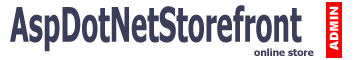
<style>
.page{position:relative;width:360px;height:60px;background:#ffffff}
.page>*{position:absolute;margin:0}
.t1{font:47.8px "Tahoma-Bold";color:#3c3c5b;scale:0.58 1}
.t2{font:10px "Tahoma-Bold";color:#3c3c5b}
</style>
<div class="page">
<p class="t1" style="left:10px;top:5px;width:292px;height:47px">AspDotNetStorefront</p>
<p class="t2" style="left:254px;top:48px;width:60px;height:8px">online store</p>
</div>
